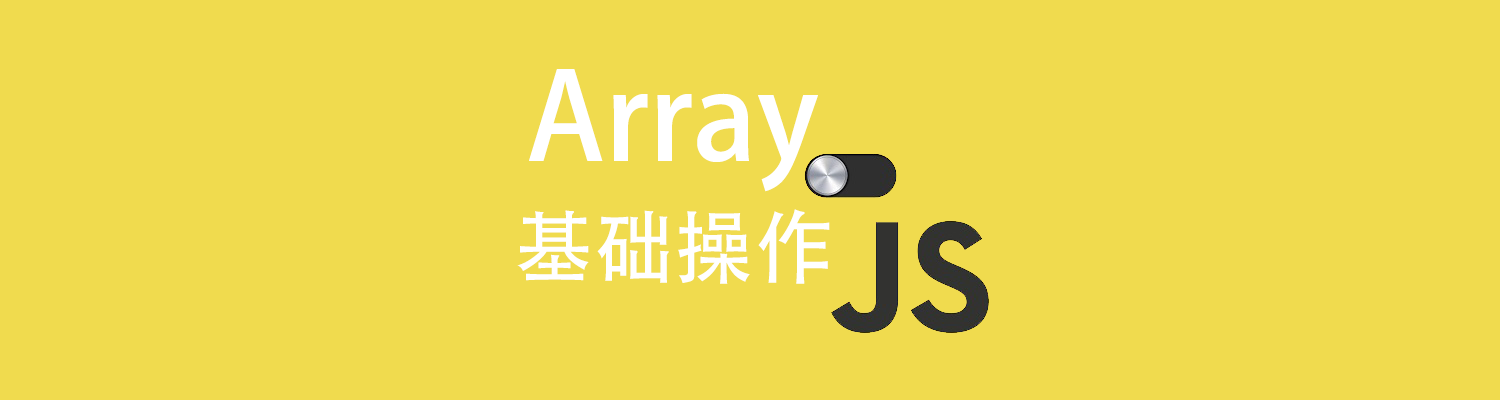
<style>
.page{position:relative;width:1500px;height:400px;background:#f0db4e}
.page>*{position:absolute;margin:0}
.t1{font:120px "AdobeHeitiStd-Regular";color:#ffffff}
.t2{font:80px "AdobeHeitiStd-Regular";color:#ffffff}
</style>
<div class="page">
<p class="t1" style="left:529px;top:69px;width:289px;height:123px">Array</p>
<p class="t2" style="left:517px;top:209px;width:313px;height:75px">基础操作</p>
</div>
